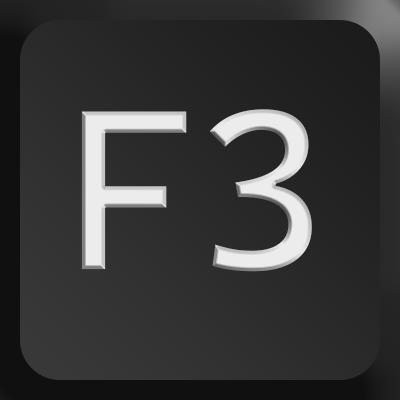
<style>
.page{position:relative;width:400px;height:400px}
.page>*{position:absolute;margin:0}
.t1{font:226.9px "CascadiaMono-Regular";letter-spacing:0.04em;color:#ececec}
</style>
<div class="page">
<p class="t1" style="left:81px;top:109px;width:231px;height:163px">F3</p>
</div>
